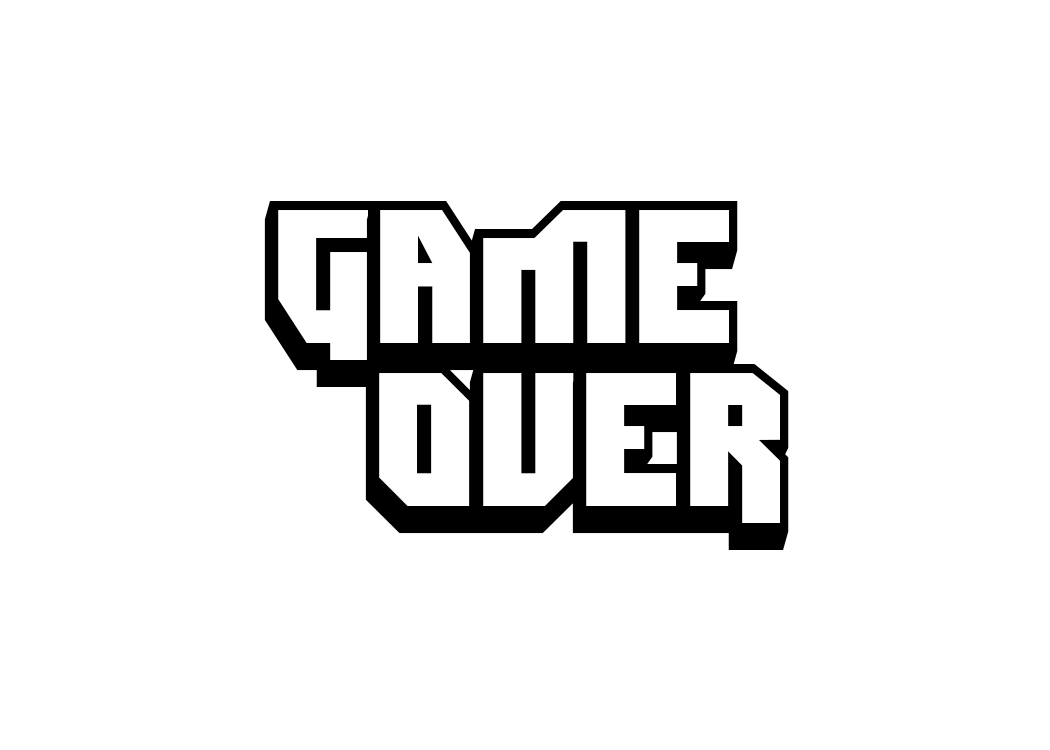
<style>
.page{position:relative;width:1050px;height:750px;background:#ffffff}
.page>*{position:absolute;margin:0}
.t1{font:190.9px "DimitriSwank";color:#000000}
</style>
<div class="page">
<p class="t1" style="left:264px;top:201px;width:474px;height:186px">game</p>
<p class="t1" style="left:365px;top:364px;width:424px;height:186px">over</p>
</div>
